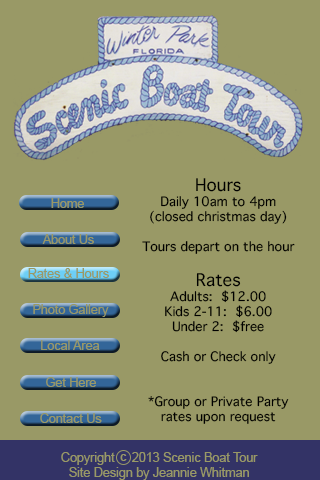
<style>
.page{position:relative;width:320px;height:480px;background:#999966}
.page>*{position:absolute;margin:0}
.t1{font:12.5px "Thonburi";color:#000000}
.t2{font:16.7px "Thonburi";color:#000000}
.t3{font:12.5px "ArialMT";color:#999966}
</style>
<div class="page">
<p class="t1" style="left:142px;top:178px;width:153px;height:246px;text-align:center"><span class="t2">Hours</span><br>Daily 10am to 4pm<br>(closed christmas day)<br><br>Tours depart on the hour<br><br><span class="t2">Rates</span><br>Adults:  $12.00<br>Kids 2-11:  $6.00<br>Under 2:  $free<br><br>Cash or Check only<br><br><br>*Group or Private Party<br>rates upon request</p>
<p class="t3" style="left:51px;top:198px;width:33px;height:10px">Home</p>
<p class="t3" style="left:42px;top:234px;width:52px;height:10px">About Us</p>
<p class="t3" style="left:28px;top:268px;width:81px;height:10px">Rates &amp; Hours</p>
<p class="t3" style="left:33px;top:304px;width:76px;height:13px">Photo Gallery</p>
<p class="t3" style="left:41px;top:340px;width:59px;height:10px">Local Area</p>
<p class="t3" style="left:46px;top:377px;width:50px;height:10px">Get Here</p>
<p class="t3" style="left:40px;top:413px;width:62px;height:10px">Contact Us</p>
<p class="t3" style="left:61px;top:452px;width:197px;height:28px;text-align:center">Copyright     2013 Scenic Boat Tour<br>Site Design by Jeannie Whitman</p>
<p class="t3" style="left:120px;top:454px;width:7px;height:7px">c</p>
</div>
